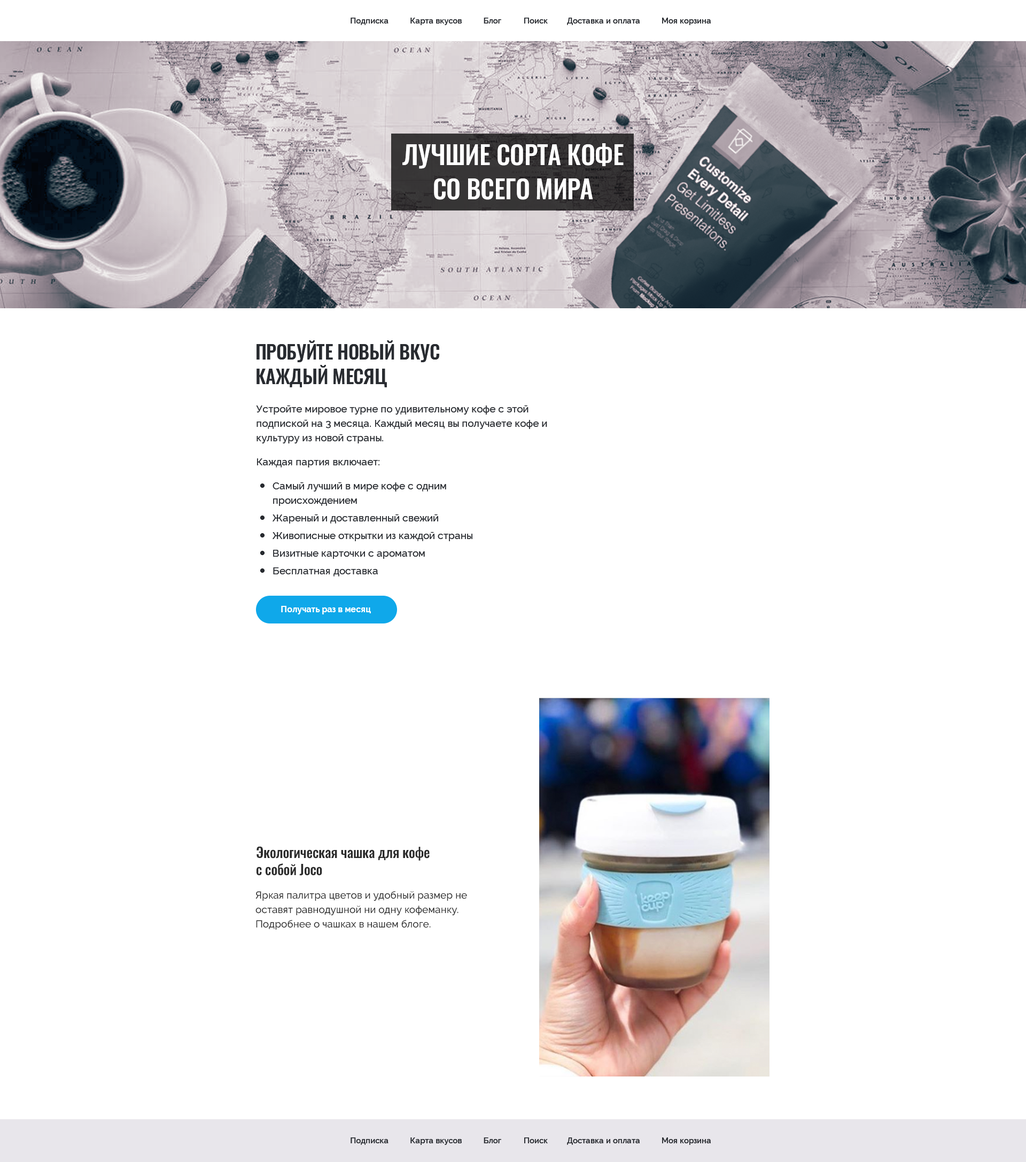
<style>
.page{position:relative;width:1026px;height:1162px;background:#ffffff}
.page>*{position:absolute;margin:0}
.t1{font:8px "Raleway-SemiBold";color:#282b30}
.t2{font:25.6px/34.2px "Oswald-Medium";letter-spacing:-0.01em;color:#ffffff;text-transform:uppercase}
.t3{font:19.2px/24.6px "Oswald-Medium";letter-spacing:-0.01em;color:#282b30;text-transform:uppercase}
.t4{font:10.2px/14.4px "Raleway-Medium";color:#282b30}
.t5{font:8.5px "Raleway-Bold";color:#ffffff}
.t6{font:13.9px/17.1px "Oswald-Medium";letter-spacing:-0.01em;color:#2b2b2b}
.t7{font:10.2px/14.4px "Raleway-Medium";color:#2b2b2b}
</style>
<div class="page">
<p class="t1" style="left:351px;top:18px;width:150px;height:7px">Подписка          Карта вкусов          Блог</p>
<p class="t1" style="left:524px;top:18px;width:187px;height:7px">Поиск         Доставка и оплата          Моя корзина</p>
<p class="t2" style="left:402px;top:143px;width:222px;height:57px;text-align:center">Лучшие сорта кофе<br>со всего мира</p>
<p class="t3" style="left:256px;top:340px;width:183px;height:47px">Пробуйте новый вкус каждый месяц</p>
<p class="t4" style="left:256px;top:405px;width:291px;height:63px">Устройте мировое турне по удивительному кофе с этой подпиской на 3 месяца. Каждый месяц вы получаете кофе и культуру из новой страны.<br>Каждая партия включает:</p>
<p class="t4" style="left:273px;top:482px;width:199px;height:95px">Самый лучший в мире кофе с одним происхождением<br>Жареный и доставленный свежий<br>Живописные открытки из каждой страны<br>Визитные карточки с ароматом<br>Бесплатная доставка</p>
<p class="t5" style="left:281px;top:606px;width:90px;height:9px">Получать раз в месяц</p>
<p class="t6" style="left:256px;top:846px;width:174px;height:30px">Экологическая чашка для кофе <br>с собой Joco</p>
<p class="t7" style="left:255px;top:891px;width:212px;height:39px">Яркая палитра цветов и удобный размер не оставят равнодушной ни одну кофеманку. Подробнее о чашках в нашем блоге.</p>
<p class="t1" style="left:351px;top:1138px;width:150px;height:7px">Подписка          Карта вкусов          Блог</p>
<p class="t1" style="left:524px;top:1138px;width:187px;height:7px">Поиск         Доставка и оплата          Моя корзина</p>
</div>
